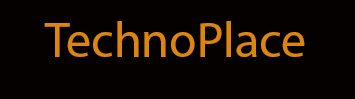
<style>
.page{position:relative;width:355px;height:99px;background:#060101}
.page>*{position:absolute;margin:0}
.t1{font:50px "MyriadPro-Regular";color:#dc860f}
</style>
<div class="page">
<p class="t1" style="left:44px;top:21px;width:261px;height:36px">TechnoPlace</p>
</div>
